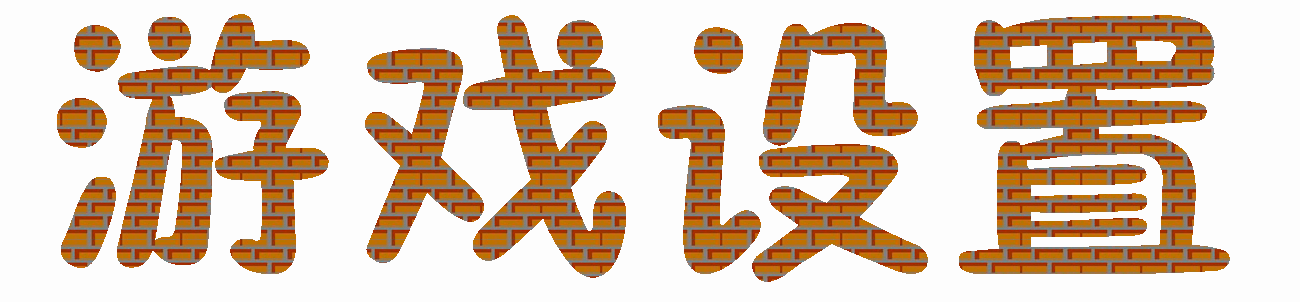
<style>
.page{position:relative;width:1300px;height:302px;background:#fdfdfd}
.page>*{position:absolute;margin:0}
.t1{font:300px "FZSEJW--GB1-0"}
</style>
<div class="page">
<p class="t1" style="left:57px;top:14px;width:1173px;height:268px">游戏设置</p>
</div>
